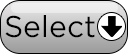
<style>
.page{position:relative;width:128px;height:54px}
.page>*{position:absolute;margin:0}
.t1{font:30px "Gotham-Book";color:#000000}
</style>
<div class="page">
<p class="t1" style="left:5px;top:15px;width:90px;height:23px">Select</p>
</div>
